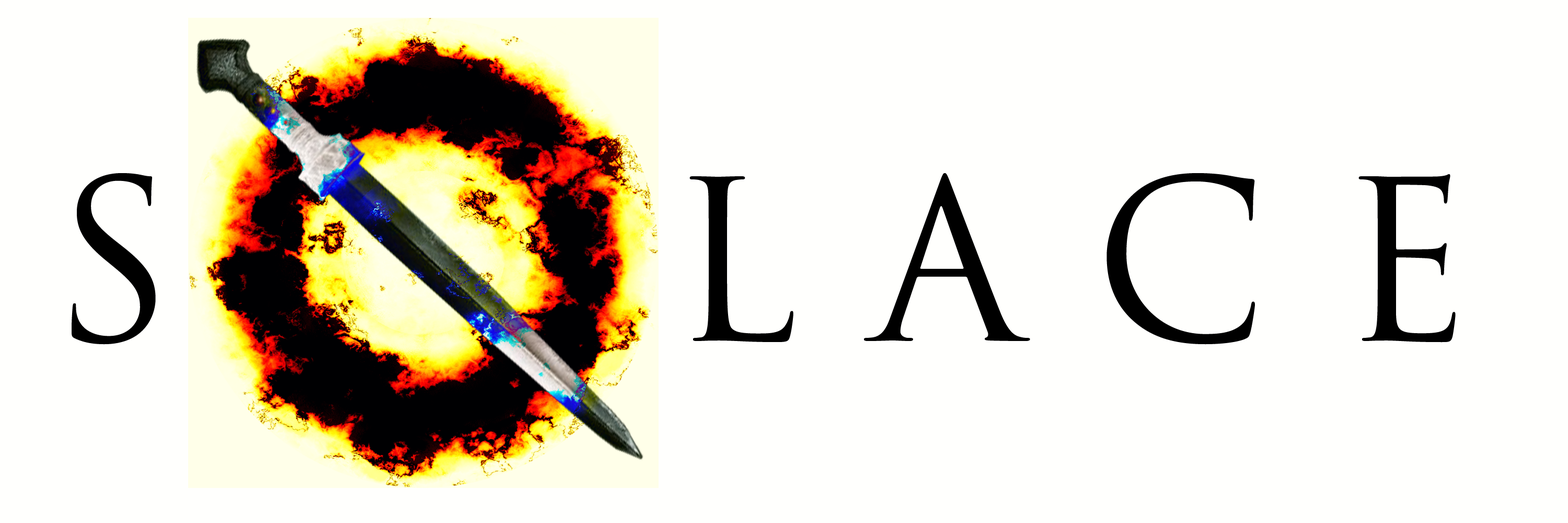
<style>
.page{position:relative;width:1568px;height:523px;background:#fffffd}
.page>*{position:absolute;margin:0}
.t1{font:217.8px "TrajanPro-Regular";color:#000000}
</style>
<div class="page">
<p class="t1" style="left:72px;top:173px;width:1384px;height:171px">S       L A C E</p>
</div>
